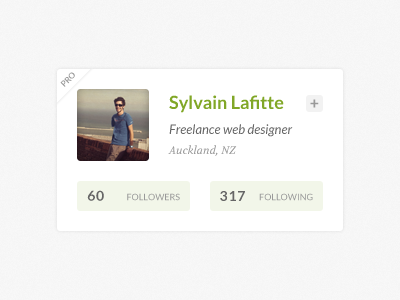
<style>
.page{position:relative;width:400px;height:300px;background:#ffffff}
.page>*{position:absolute;margin:0}
.t1{font:8px "Lato-Bold";color:#999999}
.t2{font:13px/20px "Lato-Italic";color:#666666}
.t3{font:18px/20px "Lato-Bold";color:#81a727}
.t4{font:11px/20px "Volkhov-Italic";color:#999999}
.t5{font:16px "Lato-Bold";color:#999999}
.t6{font:14px "Lato-Bold";letter-spacing:0.05em;color:#666666;text-transform:uppercase}
.t7{font:9px "Lato-Regular";color:#999999;text-transform:uppercase}
</style>
<div class="page">
<p class="t1" style="left:60px;top:72px;width:15px;height:15px;rotate:-45deg">PRO</p>
<p class="t2" style="left:168px;top:95px;width:125px;height:61px"><span class="t3">Sylvain Lafitte<br></span>Freelance web designer<br><span class="t4">Auckland, NZ</span></p>
<p class="t5" style="left:310px;top:99px;width:9px;height:9px">+</p>
<p class="t6" style="left:87px;top:190px;width:17px;height:11px">60</p>
<p class="t7" style="left:127px;top:193px;width:53px;height:8px">followers</p>
<p class="t6" style="left:220px;top:191px;width:25px;height:10px">317</p>
<p class="t7" style="left:259px;top:193px;width:54px;height:8px">following</p>
</div>
